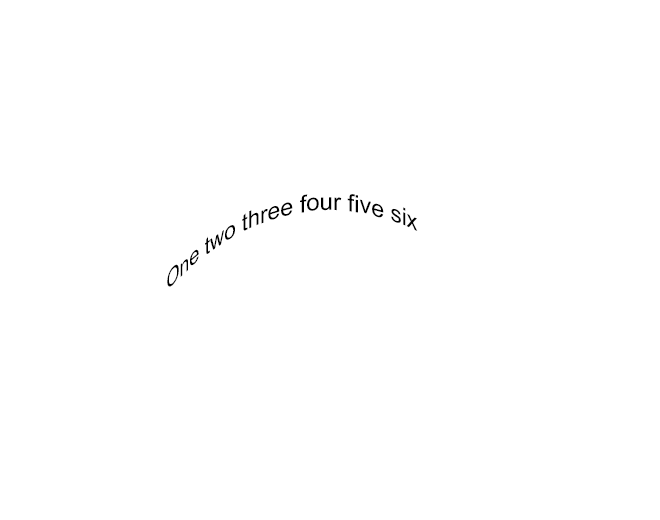
<style>
.page{position:relative;width:660px;height:520px;background:#ffffff}
.page>*{position:absolute;margin:0}
.t1{font:24px "ArialMT";color:#000000}
</style>
<div class="page">
<p class="t1" style="left:167px;top:194px;width:251px;height:93px">One two three four five six</p>
</div>
